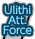
<style>
.page{position:relative;width:35px;height:39px;background:#004260}
.page>*{position:absolute;margin:0}
.t1{font:10px/10px "UDShinGoPro-Light";color:#84dbff;font-weight:bold}
</style>
<div class="page">
<p class="t1" style="left:3px;top:5px;width:29px;height:30px;text-align:center">Ulithi<br>Att.<br>Force</p>
</div>
